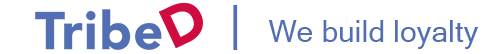
<style>
.page{position:relative;width:498px;height:54px;background:#ffffff}
.page>*{position:absolute;margin:0}
.t1{font:48px "MicrosoftSansSerif";color:#536fb4}
.t2{font:30px "MicrosoftSansSerif";color:#536fb4}
</style>
<div class="page">
<p class="t1" style="left:233px;top:5px;width:5px;height:45px">|</p>
<p class="t2" style="left:268px;top:20px;width:211px;height:29px">We build loyalty</p>
</div>
